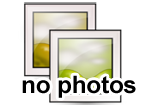
<style>
.page{position:relative;width:143px;height:105px;background:#ffffff}
.page>*{position:absolute;margin:0}
.t1{font:24px "Arial-BoldMT";color:#000000}
</style>
<div class="page">
<p class="t1" style="left:22px;top:75px;width:114px;height:23px">no photos</p>
</div>
